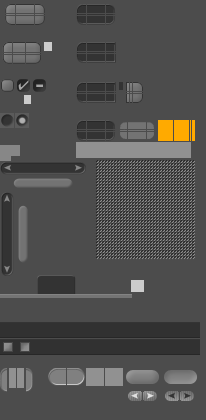
<style>
.page{position:relative;width:206px;height:420px;background:#4c4c4c}
.page>*{position:absolute;margin:0}
.t1{font:16px "ShowShifterSymbols";letter-spacing:0.1em;color:#a6a6a6}
.t2{font:16.4px "Arial-Black";letter-spacing:0.1em;color:#a6a6a6;scale:1.39 1}
</style>
<div class="page">
<p class="t1" style="left:18px;top:80px;width:11px;height:10px">x</p>
<p class="t2" style="left:36px;top:84px;width:7px;height:3px">-</p>
</div>
